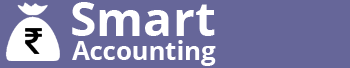
<style>
.page{position:relative;width:350px;height:68px;background:#666699}
.page>*{position:absolute;margin:0}
.t1{font:48.2px "OpenSans-Bold";color:#ffffff}
.t2{font:25.5px "OpenSans-Bold";color:#ffffff}
</style>
<div class="page">
<p class="t1" style="left:72px;top:2px;width:143px;height:34px">Smart</p>
<p class="t2" style="left:72px;top:40px;width:144px;height:26px">Accounting</p>
</div>
